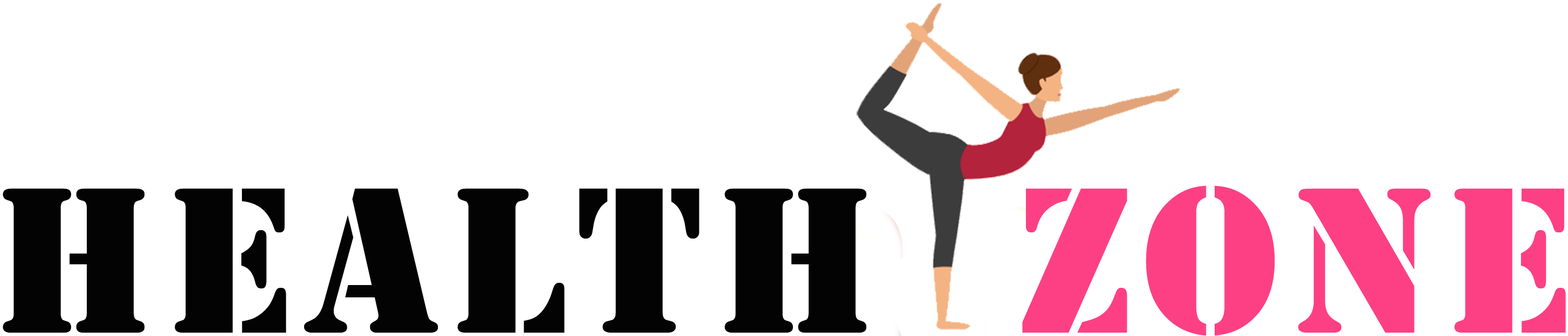
<style>
.page{position:relative;width:1568px;height:336px;background:#ffffff}
.page>*{position:absolute;margin:0}
.t1{font:216.2px "Stencil";letter-spacing:0.05em;color:#030303}
.t2{font:216.2px "Stencil";letter-spacing:0.05em;color:#fd4084}
</style>
<div class="page">
<p class="t1" style="left:3px;top:185px;width:1563px;height:151px">HEALTH  <span class="t2">ZONE</span></p>
</div>
